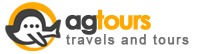
<style>
.page{position:relative;width:203px;height:54px;background:#ffffff}
.page>*{position:absolute;margin:0}
.t1{font:26.1px "CenturyGothic-Bold";letter-spacing:-0.075em;color:#ffa800;font-weight:bold}
.t2{font:26.1px "CenturyGothic-Bold";letter-spacing:-0.075em;color:#404040;font-weight:bold}
.t3{font:13px "ArialMT";letter-spacing:0.1em;color:#717171;font-weight:bold}
</style>
<div class="page">
<p class="t1" style="left:65px;top:9px;width:86px;height:26px"><span class="t2">ag</span>tours</p>
<p class="t3" style="left:66px;top:34px;width:123px;height:11px">travels and tours</p>
</div>
